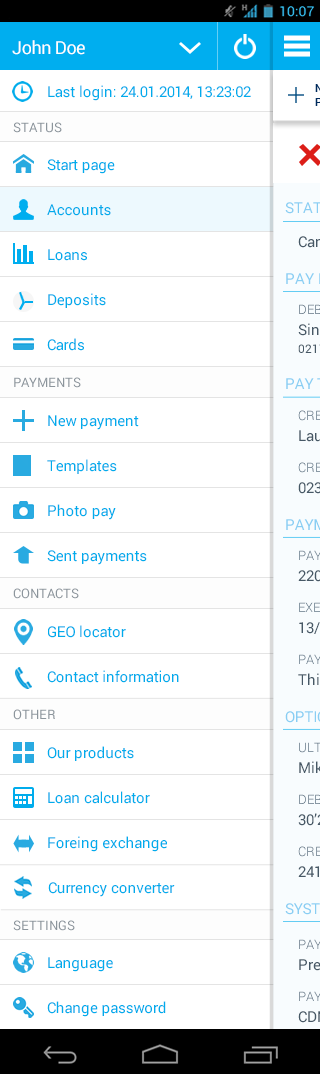
<style>
.page{position:relative;width:320px;height:1074px;background:#ffffff}
.page>*{position:absolute;margin:0}
.t1{font:18px "Roboto-Regular";letter-spacing:-0.015em;color:#ffffff}
.t2{font:15px "Roboto-Regular";letter-spacing:-0.015em;color:#00acec}
.t3{font:13px "Roboto-Regular";color:#8c959c}
</style>
<div class="page">
<p class="t1" style="left:12px;top:40px;width:73px;height:15px">John Doe</p>
<p class="t2" style="left:48px;top:85px;width:203px;height:16px">Last login: 24.01.2014, 13:23:02</p>
<p class="t3" style="left:13px;top:122px;width:49px;height:11px">STATUS</p>
<p class="t2" style="left:47px;top:159px;width:68px;height:15px">Start page</p>
<p class="t2" style="left:47px;top:204px;width:64px;height:12px">Accounts</p>
<p class="t2" style="left:48px;top:249px;width:39px;height:12px">Loans</p>
<p class="t2" style="left:48px;top:293px;width:58px;height:15px">Deposits</p>
<p class="t2" style="left:47px;top:338px;width:37px;height:13px">Cards</p>
<p class="t3" style="left:14px;top:377px;width:67px;height:11px">PAYMENTS</p>
<p class="t2" style="left:48px;top:415px;width:91px;height:15px">New payment</p>
<p class="t2" style="left:47px;top:459px;width:70px;height:15px">Templates</p>
<p class="t2" style="left:48px;top:504px;width:68px;height:16px">Photo pay</p>
<p class="t2" style="left:47px;top:550px;width:100px;height:15px">Sent payments</p>
<p class="t3" style="left:13px;top:588px;width:66px;height:11px">CONTACTS</p>
<p class="t2" style="left:48px;top:625px;width:78px;height:13px">GEO locator</p>
<p class="t2" style="left:47px;top:670px;width:132px;height:13px">Contact information</p>
<p class="t3" style="left:13px;top:709px;width:42px;height:11px">OTHER</p>
<p class="t2" style="left:47px;top:746px;width:87px;height:15px">Our products</p>
<p class="t2" style="left:48px;top:791px;width:102px;height:13px">Loan calculator</p>
<p class="t2" style="left:48px;top:836px;width:119px;height:16px">Foreing exchange</p>
<p class="t2" style="left:48px;top:882px;width:127px;height:15px">Currency converter</p>
<p class="t3" style="left:13px;top:920px;width:62px;height:11px">SETTINGS</p>
<p class="t2" style="left:48px;top:957px;width:65px;height:15px">Language</p>
<p class="t2" style="left:47px;top:1001px;width:119px;height:16px">Change password</p>
</div>
